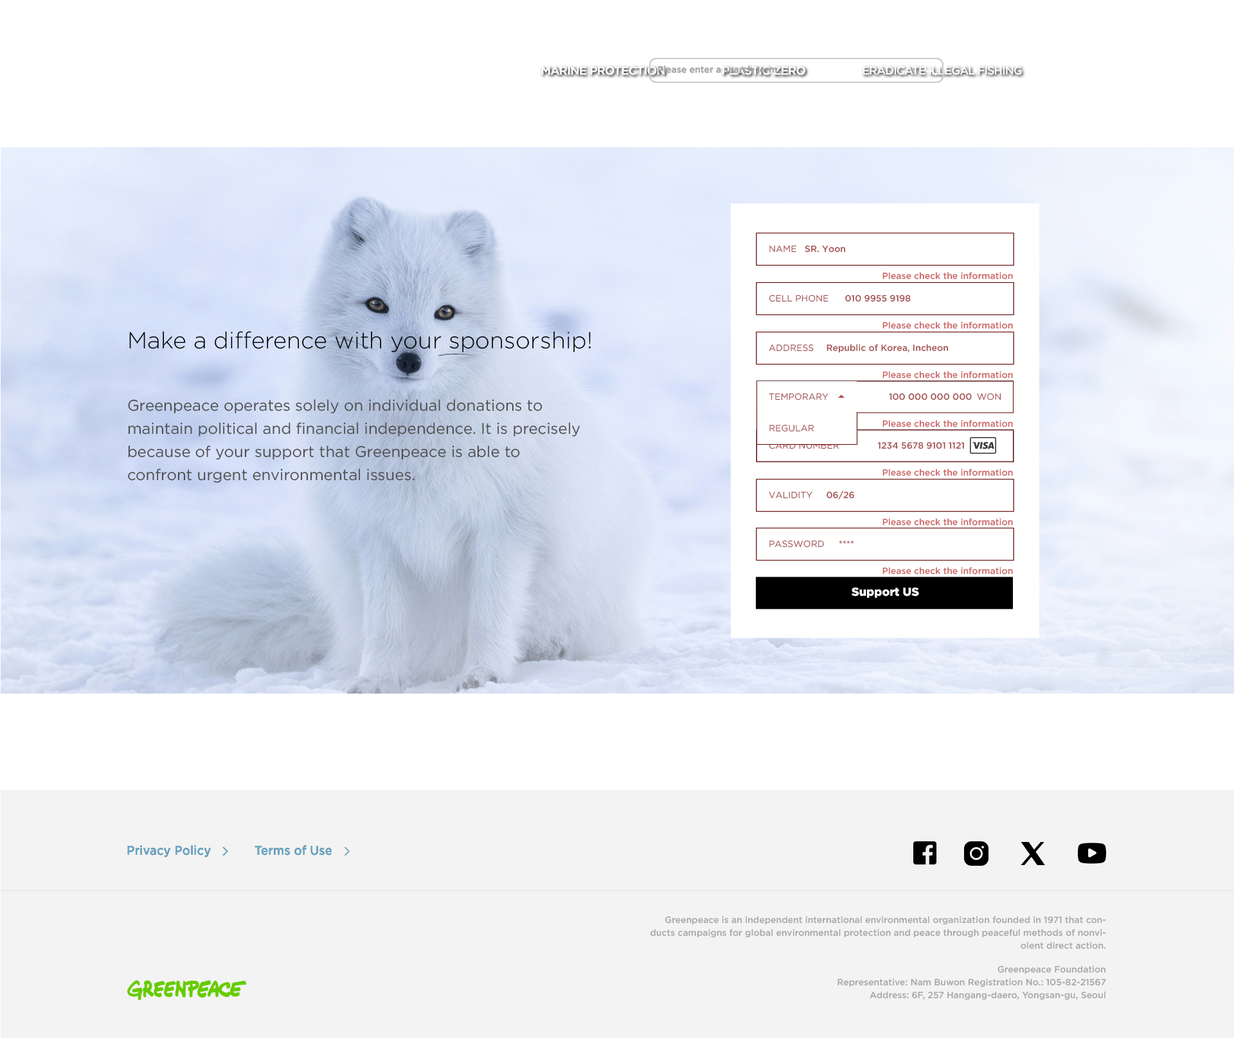
<style>
.page{position:relative;width:1234px;height:1038px;background:#ffffff}
.page>*{position:absolute;margin:0}
.t1{font:9px "GothamPro-Medium";color:#acacac}
.t2{font:11.6px "GothamPro-Medium";letter-spacing:-0.06em;color:#ffffff;font-weight:bold}
.t3{font:11.6px "GothamPro-Medium";letter-spacing:-0.06em;color:#ffffff}
.t4{font:9px "GothamPro";color:#a65151}
.t5{font:9px "GothamPro-Medium";color:#a65151}
.t6{font:9px "GothamPro-Medium";color:#cc6464}
.t7{font:9px "GothamPro-Medium"}
.t8{font:23.1px "GothamPro-Light";color:#000000}
.t9{font:15.4px/23.1px "GothamPro";color:#4e4e4e}
.t10{font:9px "GothamPro"}
.t11{font:11.6px "GothamPro-Black";color:#ffffff}
.t12{font:12.9px "GothamPro-Medium";color:#64a9cc;scale:0.93 1}
.t13{font:9px/12.9px "GothamPro-Medium";color:#a6a6a6}
</style>
<div class="page">
<p class="t1" style="left:658px;top:66px;width:126px;height:7px">Please enter a search term...</p>
<p class="t1" style="left:658px;top:66px;width:126px;height:7px">Please enter a search term...</p>
<p class="t2" style="left:541px;top:66px;width:124px;height:9px">MARINE PROTECTION</p>
<p class="t2" style="left:723px;top:66px;width:82px;height:9px">PLASTIC ZERO</p>
<p class="t3" style="left:863px;top:66px;width:159px;height:9px">ERADICATE ILLEGAL FISHING</p>
<p class="t4" style="left:769px;top:246px;width:27px;height:7px">NAME</p>
<p class="t4" style="left:769px;top:246px;width:27px;height:7px">NAME</p>
<p class="t4" style="left:769px;top:246px;width:27px;height:7px">NAME</p>
<p class="t5" style="left:805px;top:245px;width:41px;height:8px">SR. Yoon</p>
<p class="t6" style="left:883px;top:272px;width:130px;height:8px">Please check the information</p>
<p class="t4" style="left:769px;top:294px;width:60px;height:8px">CELL PHONE</p>
<p class="t4" style="left:769px;top:294px;width:60px;height:8px">CELL PHONE</p>
<p class="t4" style="left:769px;top:294px;width:60px;height:8px">CELL PHONE</p>
<p class="t7" style="left:845px;top:294px;width:65px;height:8px">010 5665 8312</p>
<p class="t5" style="left:845px;top:294px;width:66px;height:8px">010 9955 9198</p>
<p class="t6" style="left:883px;top:321px;width:130px;height:8px">Please check the information</p>
<p class="t8" style="left:129px;top:331px;width:462px;height:21px">Make a difference with your sponsorship!</p>
<p class="t4" style="left:769px;top:344px;width:45px;height:8px">ADDRESS</p>
<p class="t4" style="left:769px;top:344px;width:45px;height:8px">ADDRESS</p>
<p class="t4" style="left:769px;top:344px;width:45px;height:8px">ADDRESS</p>
<p class="t7" style="left:826px;top:344px;width:122px;height:9px">Republic of Korea, Incheon</p>
<p class="t5" style="left:827px;top:344px;width:122px;height:9px">Republic of Korea, Incheon</p>
<p class="t6" style="left:883px;top:371px;width:130px;height:8px">Please check the information</p>
<p class="t9" style="left:128px;top:399px;width:452px;height:84px">Greenpeace operates solely on individual donations to maintain political and financial independence. It is precisely because of your support that Greenpeace is able to confront urgent environmental issues.</p>
<p class="t4" style="left:769px;top:393px;width:60px;height:7px">TEMPORARY</p>
<p class="t4" style="left:769px;top:393px;width:60px;height:7px">TEMPORARY</p>
<p class="t4" style="left:769px;top:393px;width:60px;height:7px">TEMPORARY</p>
<p class="t5" style="left:889px;top:393px;width:83px;height:7px">100 000 000 000</p>
<p class="t5" style="left:889px;top:393px;width:83px;height:7px">100 000 000 000</p>
<p class="t4" style="left:977px;top:393px;width:25px;height:7px">WON</p>
<p class="t4" style="left:977px;top:393px;width:25px;height:7px">WON</p>
<p class="t4" style="left:977px;top:393px;width:25px;height:7px">WON</p>
<p class="t4" style="left:769px;top:424px;width:45px;height:8px">REGULAR</p>
<p class="t6" style="left:883px;top:420px;width:130px;height:7px">Please check the information</p>
<p class="t10" style="left:769px;top:442px;width:71px;height:7px">CARD NUMBER</p>
<p class="t10" style="left:769px;top:442px;width:71px;height:7px">CARD NUMBER</p>
<p class="t4" style="left:769px;top:442px;width:71px;height:7px">CARD NUMBER</p>
<p class="t5" style="left:877px;top:442px;width:87px;height:7px">1234 5678 9101 1121</p>
<p class="t5" style="left:877px;top:442px;width:87px;height:7px">1234 5678 9101 1121</p>
<p class="t6" style="left:883px;top:469px;width:130px;height:7px">Please check the information</p>
<p class="t4" style="left:769px;top:492px;width:44px;height:7px">VALIDITY</p>
<p class="t4" style="left:769px;top:492px;width:44px;height:7px">VALIDITY</p>
<p class="t4" style="left:769px;top:492px;width:44px;height:7px">VALIDITY</p>
<p class="t7" style="left:826px;top:490px;width:28px;height:9px">06/26</p>
<p class="t5" style="left:827px;top:490px;width:27px;height:9px">06/26</p>
<p class="t6" style="left:883px;top:518px;width:130px;height:8px">Please check the information</p>
<p class="t4" style="left:769px;top:540px;width:55px;height:8px">PASSWORD</p>
<p class="t4" style="left:769px;top:540px;width:55px;height:8px">PASSWORD</p>
<p class="t4" style="left:769px;top:540px;width:55px;height:8px">PASSWORD</p>
<p class="t7" style="left:839px;top:541px;width:15px;height:3px">****</p>
<p class="t5" style="left:839px;top:541px;width:15px;height:3px">****</p>
<p class="t6" style="left:883px;top:567px;width:130px;height:8px">Please check the information</p>
<p class="t11" style="left:852px;top:588px;width:67px;height:10px">Support US</p>
<p class="t12" style="left:127px;top:845px;width:84px;height:13px">Privacy Policy</p>
<p class="t12" style="left:127px;top:845px;width:84px;height:13px">Privacy Policy</p>
<p class="t12" style="left:255px;top:845px;width:77px;height:11px">Terms of Use</p>
<p class="t12" style="left:255px;top:845px;width:77px;height:11px">Terms of Use</p>
<p class="t13" style="left:651px;top:916px;width:455px;height:33px;text-align:right">Greenpeace is an independent international environmental organization founded in 1971 that conducts campaigns for global environmental protection and peace through peaceful methods of nonviolent direct action.</p>
<p class="t13" style="left:838px;top:966px;width:268px;height:34px;text-align:right">Greenpeace Foundation<br>Representative: Nam Buwon Registration No.: 105-82-21567<br>Address: 6F, 257 Hangang-daero, Yongsan-gu, Seoul</p>
</div>
